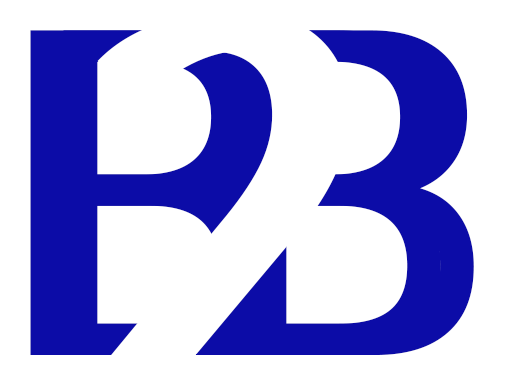
<style>
.page{position:relative;width:505px;height:392px;background:#ffffff}
.page>*{position:absolute;margin:0}
.t1{font:530.5px "NunitoSans-Regular";letter-spacing:-0.019em;color:#ffffff;scale:0.91 1}
.t2{font:460.5px "NunitoSans-Regular";letter-spacing:-0.019em;color:#0c0ca7;scale:0.91 1}
</style>
<div class="page">
<p class="t1" style="left:97px;top:14px;width:230px;height:379px">2</p>
<p class="t1" style="left:134px;top:13px;width:230px;height:379px">2</p>
<p class="t2" style="left:30px;top:30px;width:222px;height:325px">B</p>
<p class="t2" style="left:63px;top:30px;width:222px;height:325px">B</p>
<p class="t2" style="left:219px;top:30px;width:222px;height:325px">B</p>
<p class="t2" style="left:252px;top:30px;width:222px;height:325px">B</p>
</div>
